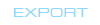
<style>
.page{position:relative;width:100px;height:25px;background:#ffffff}
.page>*{position:absolute;margin:0}
.t1{font:14px "MicrogrammaD-MediExte";letter-spacing:0.075em;color:#8dd9ff}
</style>
<div class="page">
<p class="t1" style="left:14px;top:8px;width:74px;height:9px">EXPORT</p>
</div>
